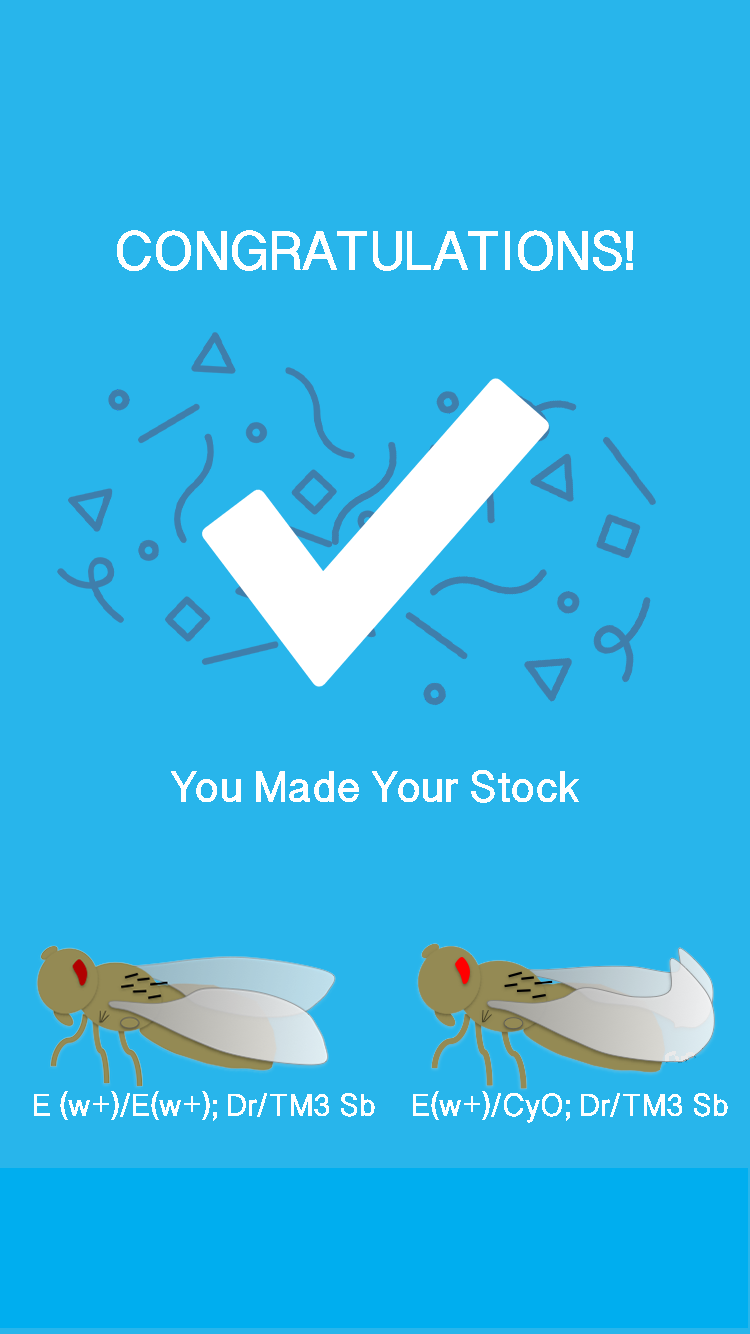
<style>
.page{position:relative;width:750px;height:1334px;background:#28b5eb}
.page>*{position:absolute;margin:0}
.t1{font:61.8px "OriyaSangamMN-Bold";color:#ffffff}
.t2{font:50px "OriyaSangamMN-Bold";color:#ffffff}
.t3{font:36px "OriyaSangamMN-Bold";color:#ffffff}
</style>
<div class="page">
<p class="t1" style="left:117px;top:230px;width:516px;height:41px">CONGRATULATIONS!</p>
<p class="t2" style="left:171px;top:770px;width:408px;height:33px">You Made Your Stock</p>
<p class="t3" style="left:34px;top:1091px;width:341px;height:30px">E (w+)/E(w+); Dr/TM3 Sb</p>
<p class="t3" style="left:413px;top:1091px;width:315px;height:32px">E(w+)/CyO; Dr/TM3 Sb</p>
</div>
